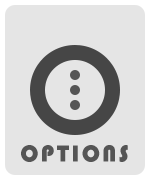
<style>
.page{position:relative;width:150px;height:180px;background:#e5e5e5}
.page>*{position:absolute;margin:0}
.t1{font:24px "Bauhaus93";letter-spacing:0.1em;color:#555555}
</style>
<div class="page">
<p class="t1" style="left:21px;top:145px;width:107px;height:17px">OPTIONS</p>
</div>
